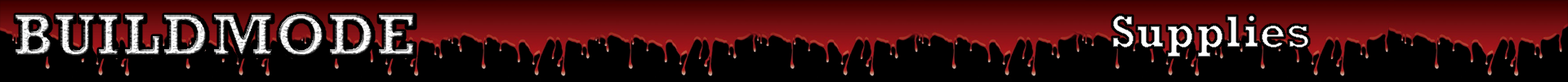
<style>
.page{position:relative;width:1568px;height:82px;background:#000000}
.page>*{position:absolute;margin:0}
.t1{font:61.2px "Rockwell-Bold"}
.t2{font:47.6px "Rockwell-Bold"}
</style>
<div class="page">
<p class="t1" style="left:16px;top:14px;width:399px;height:43px">BUILDMODE</p>
<p class="t2" style="left:1112px;top:15px;width:197px;height:42px">Supplies</p>
</div>
